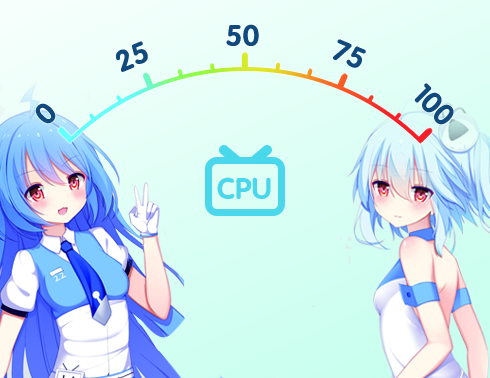
<style>
.page{position:relative;width:490px;height:378px}
.page>*{position:absolute;margin:0}
.t1{font:29.5px "FZY4JW--GB1-0";color:#10497e}
.t2{font:29.6px "FZY4JW--GB1-0";color:#4ad7eb}
</style>
<div class="page">
<p class="t1" style="left:226px;top:24px;width:33px;height:22px">50</p>
<p class="t1" style="left:116px;top:41px;width:32px;height:31px;rotate:-23deg">25</p>
<p class="t1" style="left:333px;top:39px;width:33px;height:29px;rotate:22deg">75</p>
<p class="t1" style="left:414px;top:83px;width:40px;height:42px;rotate:45deg">100</p>
<p class="t1" style="left:35px;top:103px;width:21px;height:21px;rotate:-45deg">0</p>
<p class="t2" style="left:217px;top:177px;width:54px;height:22px">CPU</p>
</div>
